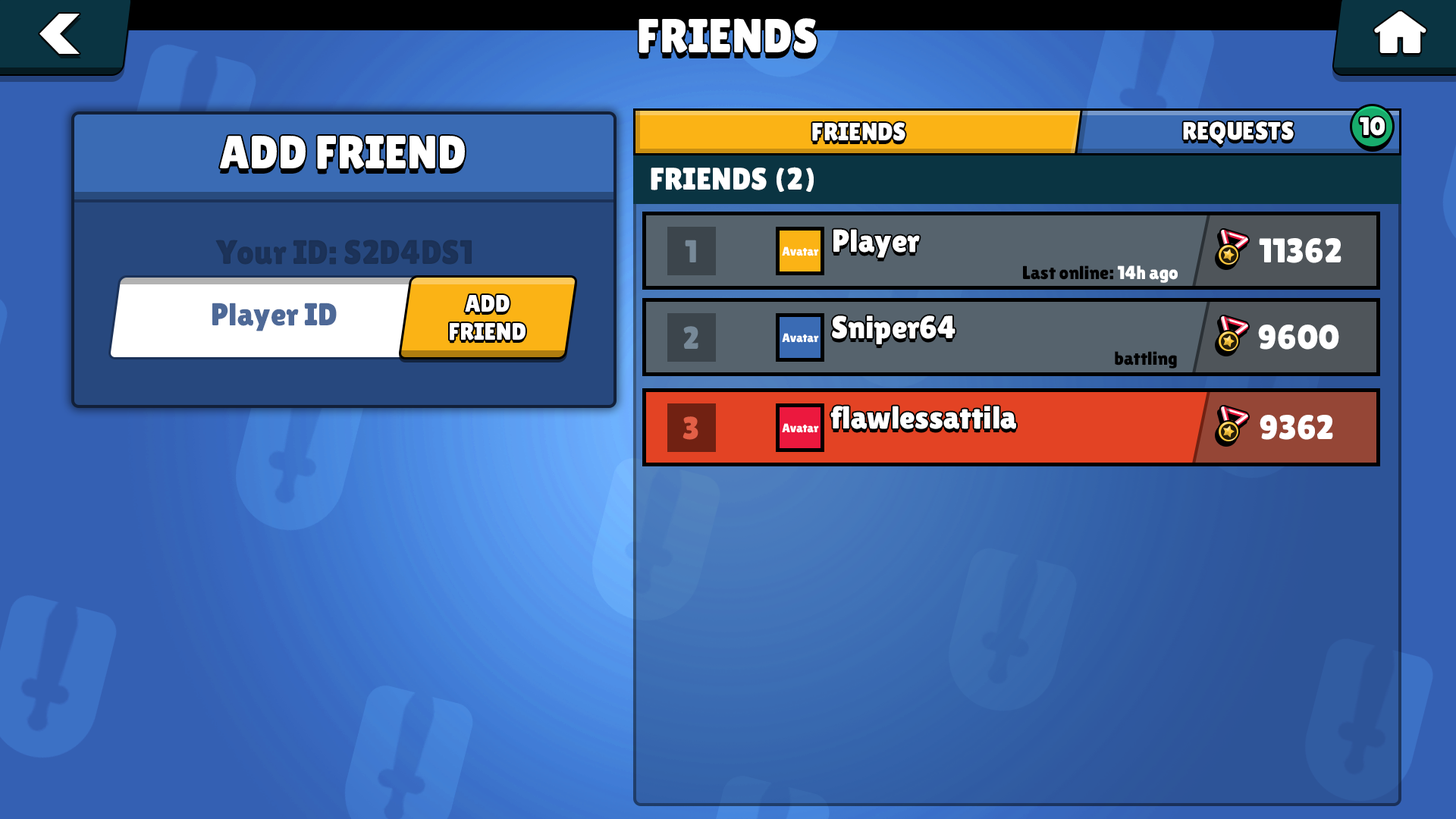
<style>
.page{position:relative;width:1456px;height:819px}
.page>*{position:absolute;margin:0}
.t1{font:47.8px "LilitaOne";color:#ffffff}
.t2{font:25px "LilitaOne";color:#ffffff}
.t3{font:25.2px "LilitaOne";color:#ffffff}
.t4{font:46.5px "LilitaOne";color:#ffffff}
.t5{font:31.1px "LilitaOne";color:#ffffff}
.t6{font:31.7px "LilitaOne";color:#ffffff}
.t7{font:33.9px "LilitaOne";color:#1c335a}
.t8{font:31.7px "LilitaOne";color:#778998}
.t9{font:34.2px "LilitaOne";color:#ffffff}
.t10{font:12.2px "LilitaOne";color:#ffffff}
.t11{font:31.7px "LilitaOne";color:#4e6997}
.t12{font:23.9px "LilitaOne";color:#ffffff}
.t13{font:18.8px "LilitaOne";color:#000000}
.t14{font:31.7px "LilitaOne";color:#e25f46}
</style>
<div class="page">
<p class="t1" style="left:639px;top:18px;width:178px;height:35px">FRIENDS</p>
<p class="t2" style="left:812px;top:122px;width:93px;height:19px">FRIENDS</p>
<p class="t2" style="left:1183px;top:121px;width:111px;height:23px">REQUESTS</p>
<p class="t3" style="left:1360px;top:118px;width:25px;height:19px">10</p>
<p class="t3" style="left:1360px;top:117px;width:25px;height:19px">10</p>
<p class="t4" style="left:220px;top:136px;width:245px;height:33px">ADD FRIEND</p>
<p class="t5" style="left:651px;top:167px;width:163px;height:25px">FRIENDS (2)</p>
<p class="t6" style="left:833px;top:229px;width:87px;height:29px">Player</p>
<p class="t7" style="left:215px;top:240px;width:257px;height:25px">Your ID: S2D4DS1</p>
<p class="t8" style="left:685px;top:240px;width:11px;height:22px">1</p>
<p class="t9" style="left:1259px;top:238px;width:82px;height:25px">11362</p>
<p class="t10" style="left:782px;top:246px;width:37px;height:10px">Avatar</p>
<p class="t11" style="left:212px;top:303px;width:125px;height:28px">Player ID</p>
<p class="t12" style="left:450px;top:295px;width:76px;height:45px;text-align:center">ADD<br>FRIEND</p>
<p class="t6" style="left:832px;top:315px;width:123px;height:29px">Sniper64</p>
<p class="t8" style="left:683px;top:326px;width:15px;height:23px">2</p>
<p class="t9" style="left:1258px;top:325px;width:81px;height:25px">9600</p>
<p class="t10" style="left:782px;top:333px;width:37px;height:10px">Avatar</p>
<p class="t13" style="left:1115px;top:351px;width:62px;height:18px">battling</p>
<p class="t6" style="left:830px;top:406px;width:186px;height:23px">flawlessattila</p>
<p class="t14" style="left:682px;top:416px;width:16px;height:24px">3</p>
<p class="t10" style="left:782px;top:423px;width:37px;height:10px">Avatar</p>
<p class="t9" style="left:1260px;top:415px;width:73px;height:25px">9362</p>
</div>
